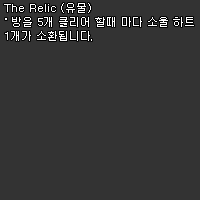
<style>
.page{position:relative;width:200px;height:200px;background:#333333}
.page>*{position:absolute;margin:0}
.t1{font:11px/14px "Dotum";color:#ffffff}
</style>
<div class="page">
<p class="t1" style="left:4px;top:3px;width:190px;height:38px">The Relic (유물)<br>˚ 방을 5개 클리어 할때 마다 소울 하트<br>1개가 소환됩니다.</p>
</div>
